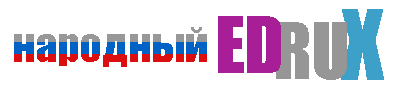
<style>
.page{position:relative;width:400px;height:90px;background:#ffffff}
.page>*{position:absolute;margin:0}
.t1{font:72px "Impact";color:#a81e96}
.t2{font:90px "Impact";color:#3da0c9}
.t3{font:72px "Impact";color:#969696}
</style>
<div class="page">
<p class="t1" style="left:218px;top:16px;width:63px;height:57px">ED</p>
<p class="t2" style="left:341px;top:9px;width:43px;height:71px">X</p>
<p class="t3" style="left:276px;top:22px;width:71px;height:58px">RU</p>
</div>
